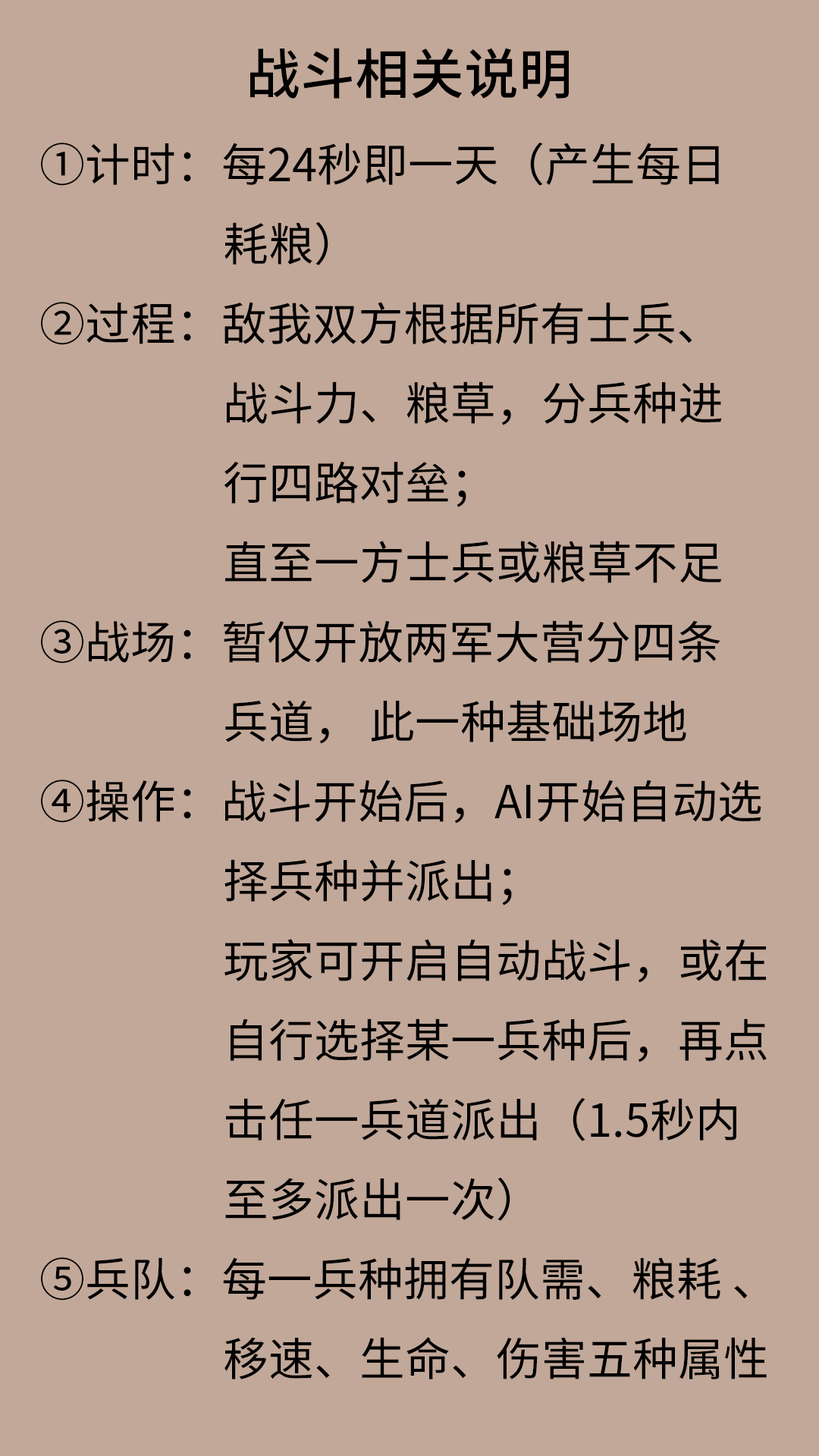
<style>
.page{position:relative;width:819px;height:1456px;background:#c2a899}
.page>*{position:absolute;margin:0}
.t1{font:45.5px "NotoSansHans-Regular";color:#000000}
.t2{font:54.6px "NotoSansHans-Medium";color:#000000}
</style>
<div class="page">
<p class="t1" style="left:41px;top:48px;width:726px;height:1331px;text-align:center"><span class="t2">战斗相关说明<br></span>①计时：每24秒即一天（产生每日<br>                  耗粮）<br>②过程：敌我双方根据所有士兵、<br>                  战斗力、粮草，分兵种进<br>                  行四路对垒；<br>                  直至一方士兵或粮草不足<br>③战场：暂仅开放两军大营分四条<br>                  兵道， 此一种基础场地<br>④操作：战斗开始后，AI开始自动选<br>                  择兵种并派出；<br>                  玩家可开启自动战斗，或在                  <br>                  自行选择某一兵种后，再点<br>                  击任一兵道派出（1.5秒内<br>                  至多派出一次）<br>⑤兵队：每一兵种拥有队需、粮耗 、<br>                  移速、生命、伤害五种属性<br>         （基础伤害+战斗力加成伤害）五种属性;</p>
</div>
